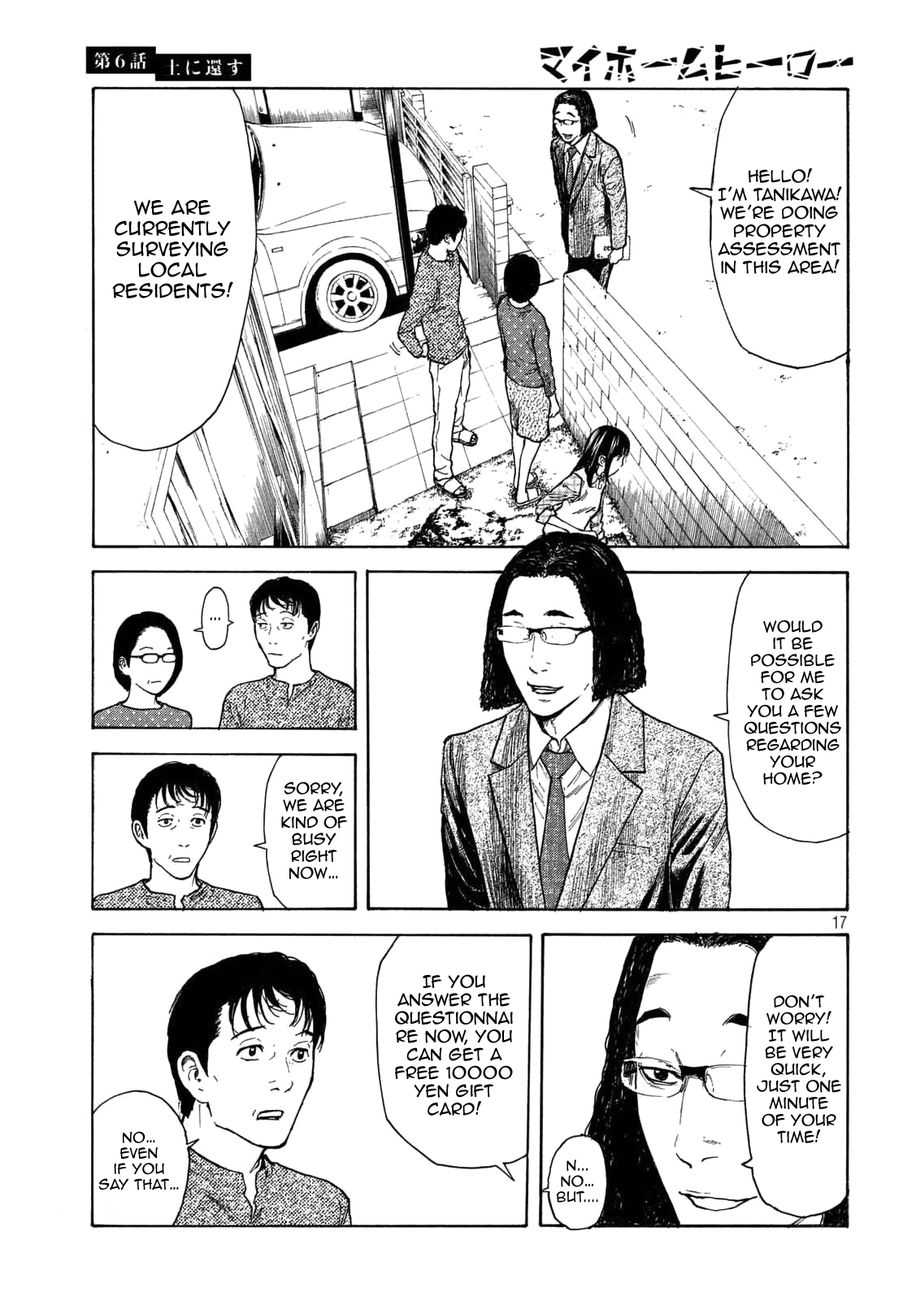
<style>
.page{position:relative;width:916px;height:1301px;background:#ffffff}
.page>*{position:absolute;margin:0}
.t1{font:15.2px "AnimeAce2.0BB";color:#000000}
.t2{font:17.4px "AnimeAce2.0BB";color:#000000}
.t3{font:14.1px "AnimeAce2.0BB";color:#000000}
.t4{font:9.8px "AnimeAce2.0BB";color:#000000}
.t5{font:13px "AnimeAce2.0BB";color:#000000}
</style>
<div class="page">
<p class="t1" style="left:718px;top:168px;width:124px;height:106px;text-align:center">Hello! <br>I’m Tanikawa! <br>We’re doing property assessment <br>in this area!</p>
<p class="t2" style="left:112px;top:199px;width:121px;height:99px;text-align:center">We are currently surveying local residents!</p>
<p class="t3" style="left:210px;top:617px;width:10px;height:3px">...</p>
<p class="t3" style="left:744px;top:620px;width:98px;height:165px;text-align:center">Would <br>it be possible for me <br>to ask you a few questions regarding your home?</p>
<p class="t3" style="left:281px;top:781px;width:66px;height:99px;text-align:center">Sorry, we are kind of busy right now…</p>
<p class="t1" style="left:395px;top:974px;width:118px;height:142px;text-align:center">If you <br>answer the questionnaire now, you can get a free 10000 yen gift card!</p>
<p class="t3" style="left:757px;top:994px;width:85px;height:149px;text-align:center">Don’t worry! It will be very quick, just one minute of your time!</p>
<p class="t4" style="left:98px;top:1131px;width:81px;height:60px;text-align:center">No… <br>Even <br>if you say that…</p>
<p class="t5" style="left:556px;top:1160px;width:43px;height:43px;text-align:center">N...<br>No… But....</p>
</div>
